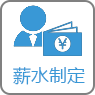
<style>
.page{position:relative;width:95px;height:95px;background:#ffffff}
.page>*{position:absolute;margin:0}
.t1{font:18px "MicrosoftYaHei";color:#3998d6}
</style>
<div class="page">
<p class="t1" style="left:13px;top:67px;width:72px;height:18px">薪水制定</p>
</div>
